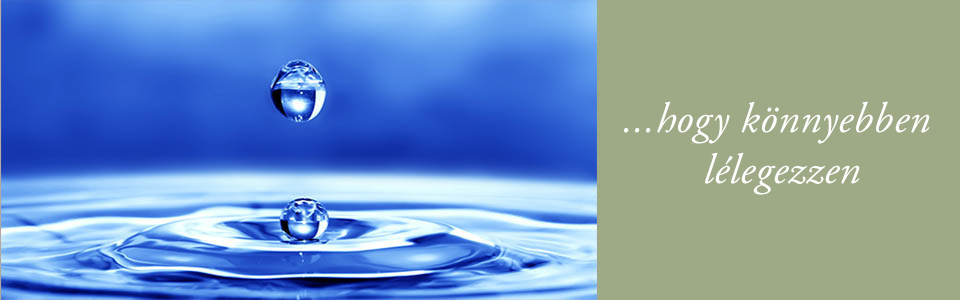
<style>
.page{position:relative;width:960px;height:300px;background:#9eaa86}
.page>*{position:absolute;margin:0}
.t1{font:42.4px "AGaramond-Italic";letter-spacing:0.015em;color:#ffffff}
</style>
<div class="page">
<p class="t1" style="left:624px;top:101px;width:306px;height:94px;text-align:center">...hogy könnyebben<br> lélegezzen</p>
</div>
